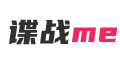
<style>
.page{position:relative;width:120px;height:60px;background:#ffffff}
.page>*{position:absolute;margin:0}
.t1{font:34px "YouSheBiaoTiHei";color:#30302d}
.t2{font:34px "YouSheBiaoTiHei";color:#f92560}
</style>
<div class="page">
<p class="t1" style="left:8px;top:19px;width:110px;height:26px">谍战<span class="t2">me</span></p>
</div>
